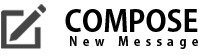
<style>
.page{position:relative;width:200px;height:56px;background:#ffffff}
.page>*{position:absolute;margin:0}
.t1{font:29px "AdobeGothicStd-Bold";color:#000000}
.t2{font:12px "AdobeGothicStd-Bold";letter-spacing:0.45em;color:#000000}
</style>
<div class="page">
<p class="t1" style="left:65px;top:9px;width:133px;height:23px">COMPOSE</p>
<p class="t2" style="left:70px;top:36px;width:128px;height:13px">New Message</p>
</div>
